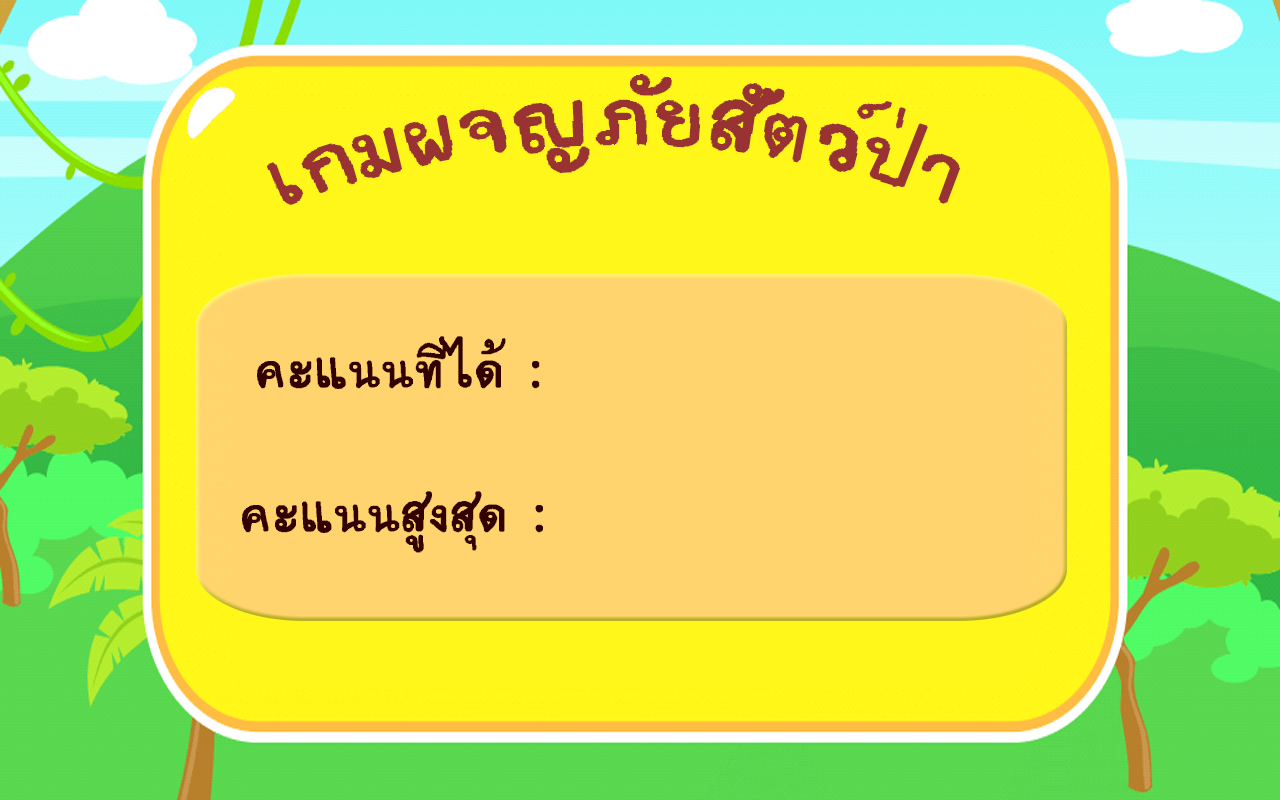
<style>
.page{position:relative;width:1280px;height:800px;background:#ffd46e}
.page>*{position:absolute;margin:0}
.t1{font:120px "teddy";color:#993333}
.t2{font:71.4px "teddy";color:#330000}
</style>
<div class="page">
<p class="t1" style="left:266px;top:74px;width:695px;height:131px">เกมผจญภัยสัตว์ป่า</p>
<p class="t2" style="left:257px;top:336px;width:283px;height:53px">คะแนนที่ได้ :</p>
<p class="t2" style="left:242px;top:491px;width:301px;height:62px">คะแนนสูงสุด :</p>
</div>
